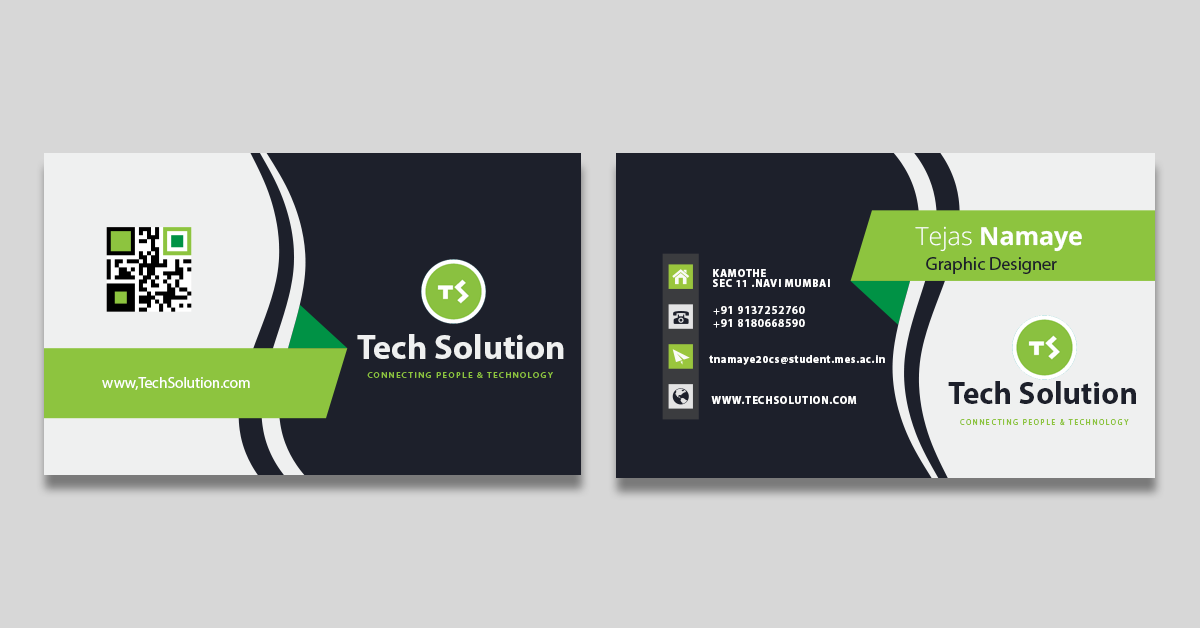
<style>
.page{position:relative;width:1200px;height:628px;background:#d7d7d7}
.page>*{position:absolute;margin:0}
.t1{font:25.1px "OpenSansRoman-Bold";color:#ffffff}
.t2{font:25.1px "OpenSansRoman-Light";color:#ffffff}
.t3{font:18.3px "MyriadPro-Regular";color:#1d202b}
.t4{font:10.6px "MyriadPro-Bold";letter-spacing:0.075em;color:#ffffff}
.t5{font:10.9px "MyriadPro-Bold";letter-spacing:0.075em;color:#ffffff}
.t6{font:34.7px "MyriadPro-Bold";color:#eff0f0}
.t7{font:15px "MyriadPro-Regular";color:#ffffff}
.t8{font:8.5px "MyriadPro-Regular";letter-spacing:0.2em;color:#8dc43f}
.t9{font:31.7px "MyriadPro-Bold";color:#1d202b}
.t10{font:7.8px "MyriadPro-Regular";letter-spacing:0.2em;color:#8dc43f}
</style>
<div class="page">
<p class="t1" style="left:915px;top:226px;width:167px;height:26px"><span class="t2">Tejas</span> Namaye</p>
<p class="t3" style="left:926px;top:257px;width:131px;height:17px">Graphic Designer</p>
<p class="t4" style="left:713px;top:269px;width:53px;height:8px">KAMOTHE</p>
<p class="t4" style="left:713px;top:279px;width:117px;height:8px">SEC 11 .NAVI MUMBAI</p>
<p class="t5" style="left:713px;top:306px;width:92px;height:22px">+91 9137252760<br>+91 8180668590</p>
<p class="t6" style="left:357px;top:334px;width:207px;height:25px">Tech Solution</p>
<p class="t4" style="left:709px;top:355px;width:176px;height:10px">tnamaye20cs@student.mes.ac.in</p>
<p class="t7" style="left:102px;top:377px;width:148px;height:13px">www,TechSolution.com</p>
<p class="t8" style="left:367px;top:372px;width:186px;height:6px">CONNECTING PEOPLE &amp; TECHNOLOGY</p>
<p class="t9" style="left:948px;top:381px;width:188px;height:23px">Tech Solution</p>
<p class="t4" style="left:711px;top:396px;width:146px;height:8px">WWW.TECHSOLUTION.COM</p>
<p class="t10" style="left:960px;top:419px;width:169px;height:6px">CONNECTING PEOPLE &amp; TECHNOLOGY</p>
</div>
